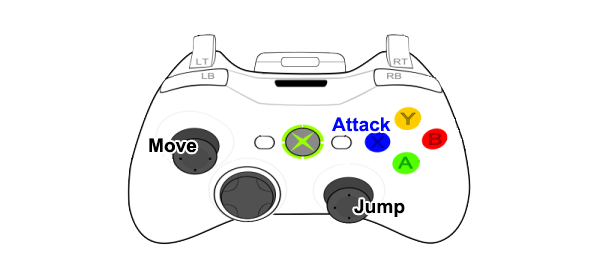
<style>
.page{position:relative;width:600px;height:278px;background:#ffffff}
.page>*{position:absolute;margin:0}
.t1{font:19.1px "Arial-BoldMT";color:#0006ff}
.t2{font:19.1px "Arial-BoldMT";color:#000000}
</style>
<div class="page">
<p class="t1" style="left:332px;top:117px;width:59px;height:15px">Attack</p>
<p class="t2" style="left:149px;top:138px;width:48px;height:15px">Move</p>
<p class="t2" style="left:354px;top:199px;width:51px;height:18px">Jump</p>
</div>
